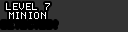
<style>
.page{position:relative;width:128px;height:32px;background:#333333}
.page>*{position:absolute;margin:0}
.t1{font:8px "Terminal";letter-spacing:0.05em;color:#ffffff}
</style>
<div class="page">
<p class="t1" style="left:6px;top:3px;width:44px;height:7px">LEVEL 7</p>
<p class="t1" style="left:9px;top:12px;width:37px;height:7px">MINION</p>
</div>
